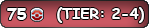
<style>
.page{position:relative;width:149px;height:28px}
.page>*{position:absolute;margin:0}
.t1{font:12px "ComicSansMS-Bold";color:#ffffff}
.t2{font:14.7px "ComicSansMS-Bold";color:#ffffff}
</style>
<div class="page">
<p class="t1" style="left:7px;top:8px;width:20px;height:12px">75</p>
<p class="t2" style="left:57px;top:7px;width:87px;height:16px">(TIER: 2-4)</p>
</div>
